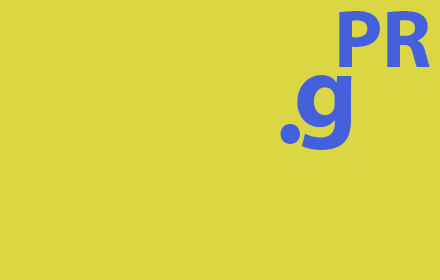
<style>
.page{position:relative;width:440px;height:280px;background:#dbd644}
.page>*{position:absolute;margin:0}
.t1{font:83.3px "MyriadPro-Bold";color:#4460db}
.t2{font:108.3px "MyriadPro-Bold";color:#4460db}
</style>
<div class="page">
<p class="t1" style="left:339px;top:11px;width:91px;height:56px">PR</p>
<p class="t2" style="left:297px;top:74px;width:55px;height:76px">g</p>
<p class="t2" style="left:280px;top:123px;width:20px;height:21px">.</p>
</div>
